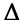
<style>
.page{position:relative;width:24px;height:24px;background:#ffffff}
.page>*{position:absolute;margin:0}
.t1{font:24px "Sylfaen";color:#000000;font-weight:bold}
</style>
<div class="page">
<p class="t1" style="left:4px;top:3px;width:16px;height:17px">Δ</p>
</div>
